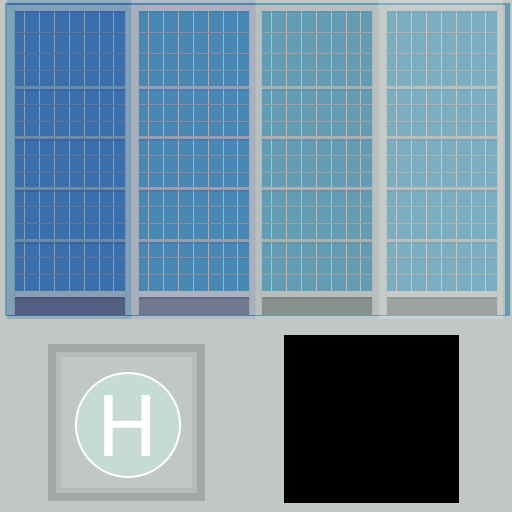
<style>
.page{position:relative;width:512px;height:512px;background:#c1c7c5}
.page>*{position:absolute;margin:0}
.t1{font:90.9px "MS-UIGothic";letter-spacing:-0.025em;color:#ffffff}
</style>
<div class="page">
<p class="t1" style="left:104px;top:395px;width:46px;height:61px">H</p>
</div>
